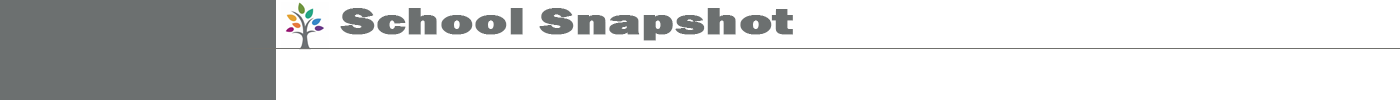
<style>
.page{position:relative;width:1400px;height:100px;background:#ffffff}
.page>*{position:absolute;margin:0}
.t1{font:37.5px "FranklinGothic-Heavy";color:#6c7070;font-weight:bold;scale:1.45 1}
</style>
<div class="page">
<p class="t1" style="left:340px;top:8px;width:453px;height:33px">School Snapshot</p>
</div>
